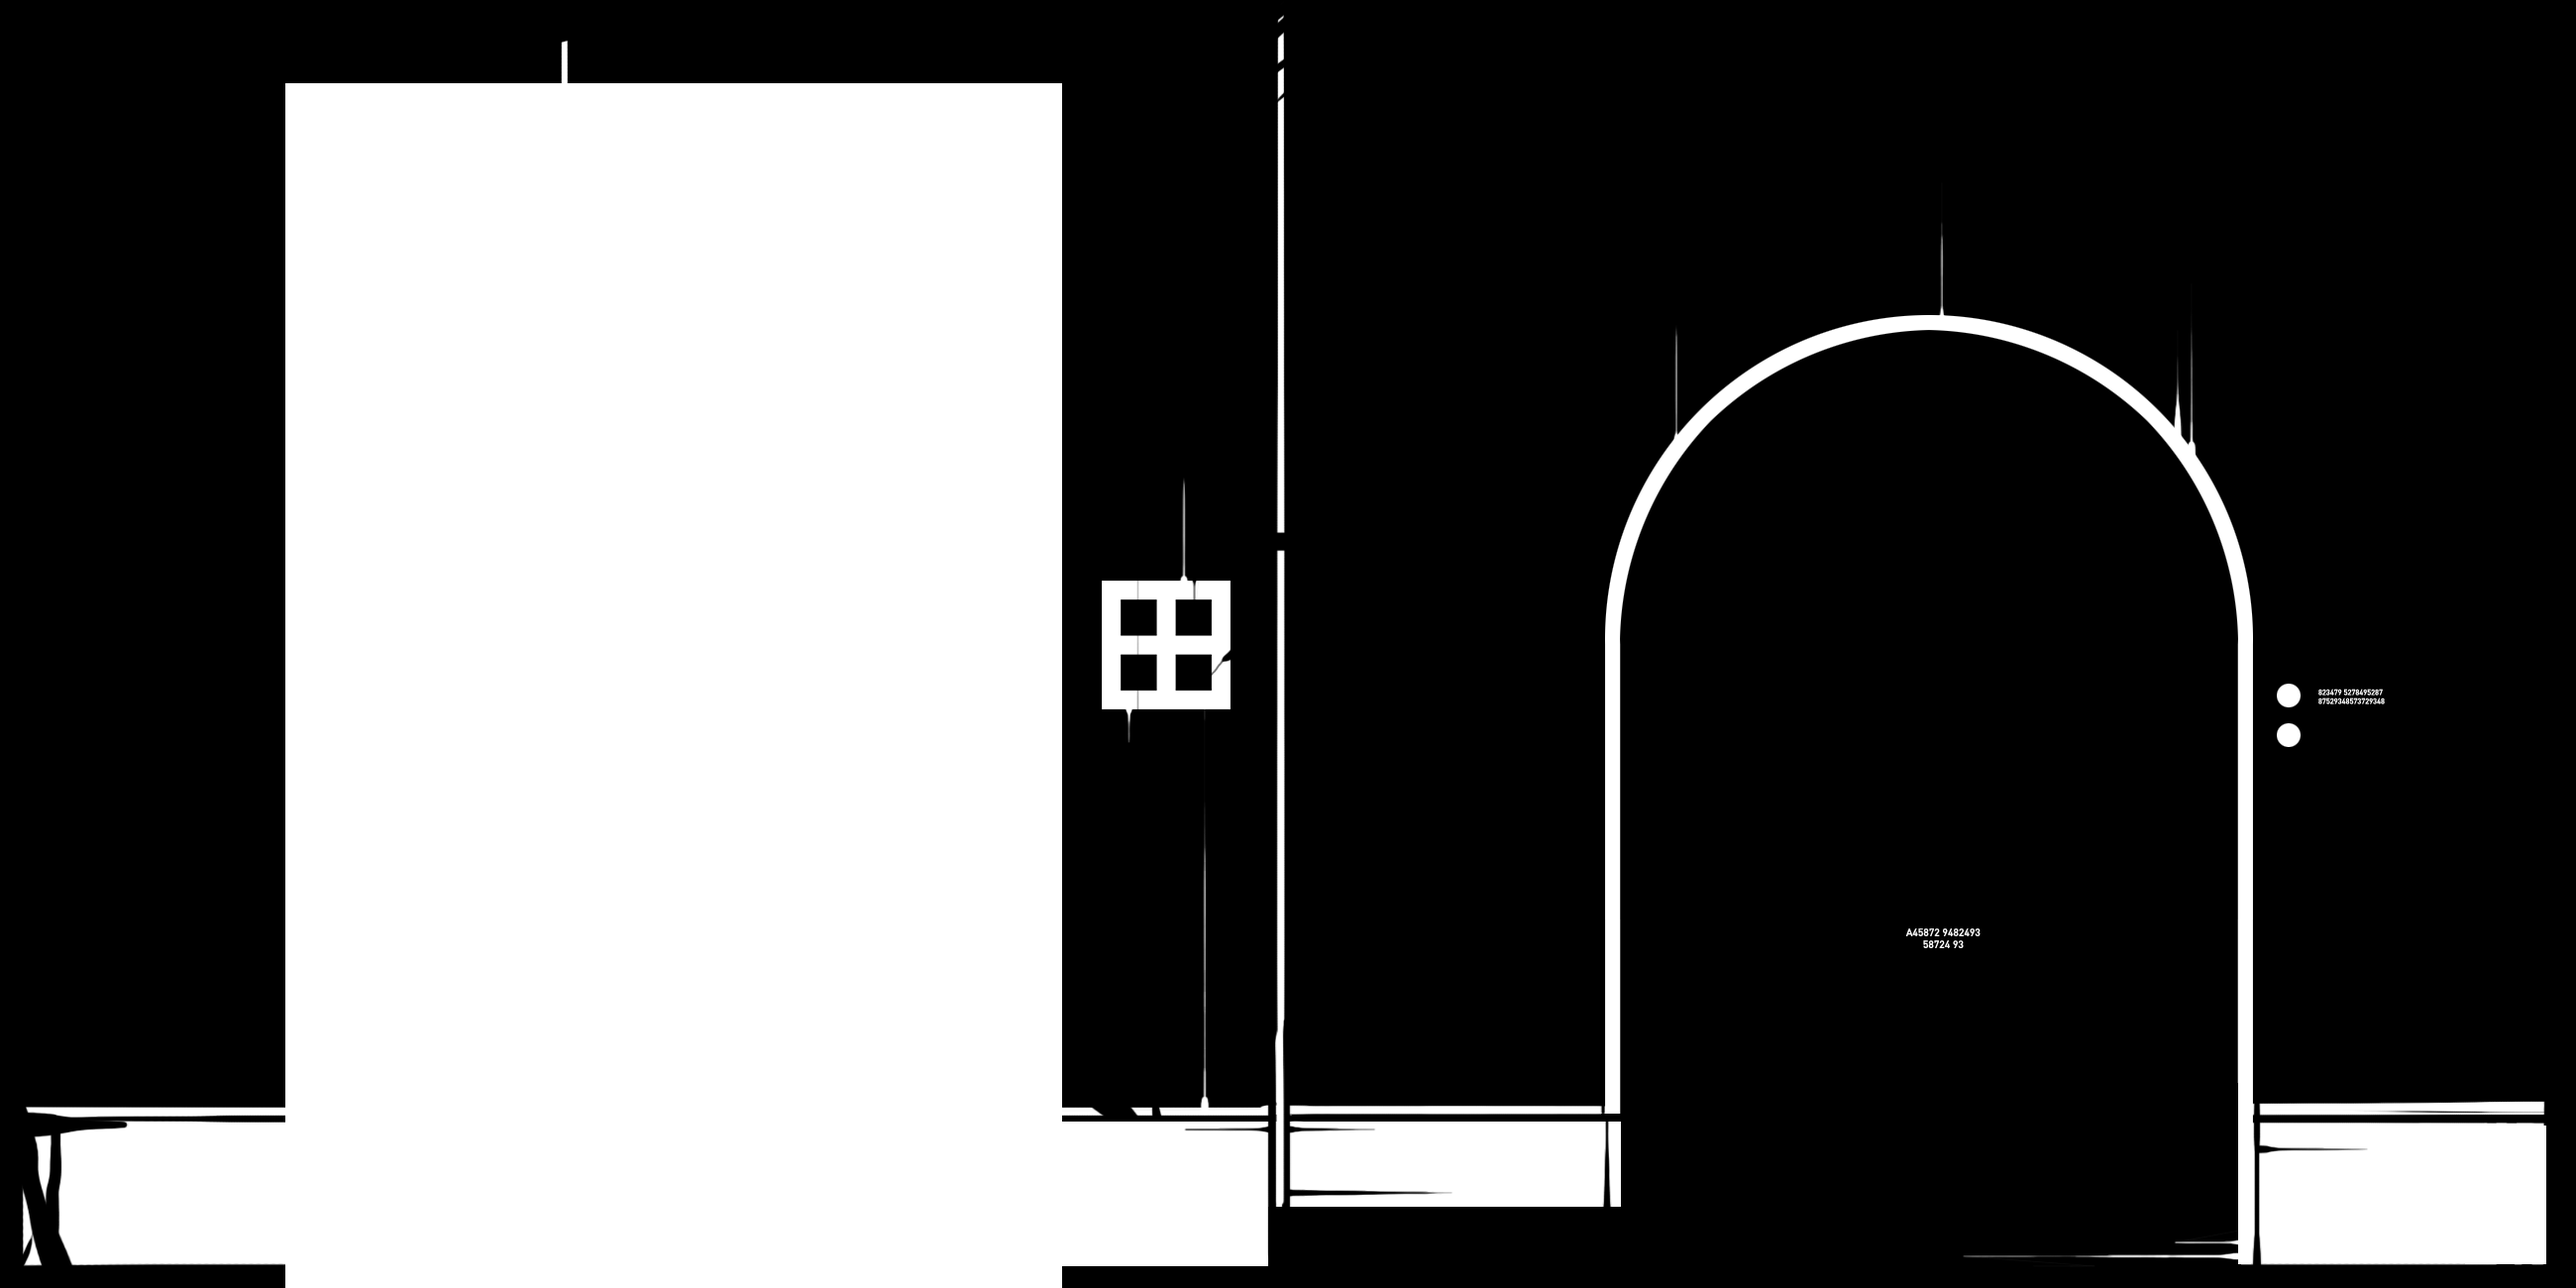
<style>
.page{position:relative;width:2576px;height:1288px;background:#000000}
.page>*{position:absolute;margin:0}
.t1{font:7.4px "DIN-Regular";letter-spacing:-0.01em;color:#ffffff;font-weight:bold}
.t2{font:10px "DIN-Regular";letter-spacing:-0.01em;color:#ffffff;font-weight:bold}
</style>
<div class="page">
<p class="t1" style="left:2318px;top:689px;width:67px;height:15px">823479 5278495287<br>87529348573729348</p>
<p class="t2" style="left:1906px;top:928px;width:75px;height:20px;text-align:center">A45872 9482493<br>58724 93</p>
</div>
